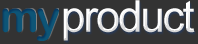
<style>
.page{position:relative;width:198px;height:44px;background:#333333}
.page>*{position:absolute;margin:0}
.t1{font:44px "ArialMT";letter-spacing:-0.05em;color:#ffffff}
.t2{font:44px "ArialRoundedMTBold";letter-spacing:-0.05em;color:#0d5577}
</style>
<div class="page">
<p class="t1" style="left:63px;top:0px;width:132px;height:41px">product</p>
<p class="t2" style="left:2px;top:8px;width:57px;height:33px">my</p>
</div>
